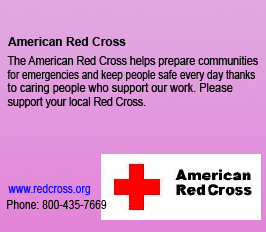
<style>
.page{position:relative;width:266px;height:232px}
.page>*{position:absolute;margin:0}
.t1{font:12px "Arial-BoldMT";color:#000000}
.t2{font:12px "ArialMT";color:#000000;scale:0.89 1}
.t3{font:12px "ArialMT";color:#000000;scale:0.83 1}
.t4{font:12px "ArialMT";color:#000000;scale:0.91 1}
.t5{font:12px "ArialMT";color:#000000;scale:0.88 1}
.t6{font:12px "ArialMT";color:#0b0bf9;scale:0.86 1}
.t7{font:12px "ArialMT";color:#000000;scale:0.86 1}
</style>
<div class="page">
<p class="t1" style="left:8px;top:37px;width:118px;height:9px">American Red Cross</p>
<p class="t2" style="left:7px;top:56px;width:251px;height:11px">The American Red Cross helps prepare communities</p>
<p class="t3" style="left:7px;top:70px;width:248px;height:11px">for emergencies and keep people safe every day thanks</p>
<p class="t4" style="left:7px;top:83px;width:226px;height:11px">to caring people who support our work. Please</p>
<p class="t5" style="left:7px;top:97px;width:139px;height:11px">support your local Red Cross.</p>
<p class="t6" style="left:8px;top:184px;width:82px;height:11px">www.redcross.org</p>
<p class="t7" style="left:7px;top:200px;width:100px;height:9px">Phone: 800-435-7669</p>
</div>
